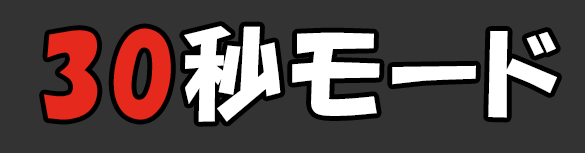
<style>
.page{position:relative;width:585px;height:153px;background:#333333}
.page>*{position:absolute;margin:0}
.t1{font:100px "HGPSoeiKakupoptai";letter-spacing:0.075em;color:#ffffff}
.t2{font:100px "HGPSoeiKakupoptai";letter-spacing:0.075em;color:#e5291c}
</style>
<div class="page">
<p class="t1" style="left:44px;top:26px;width:513px;height:96px"><span class="t2">30</span>秒モード</p>
</div>
